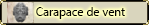
<style>
.page{position:relative;width:149px;height:25px;background:#d9d5bd}
.page>*{position:absolute;margin:0}
.t1{font:11.7px "LaoUI";color:#000000}
</style>
<div class="page">
<p class="t1" style="left:36px;top:7px;width:89px;height:12px">Carapace de vent</p>
</div>
